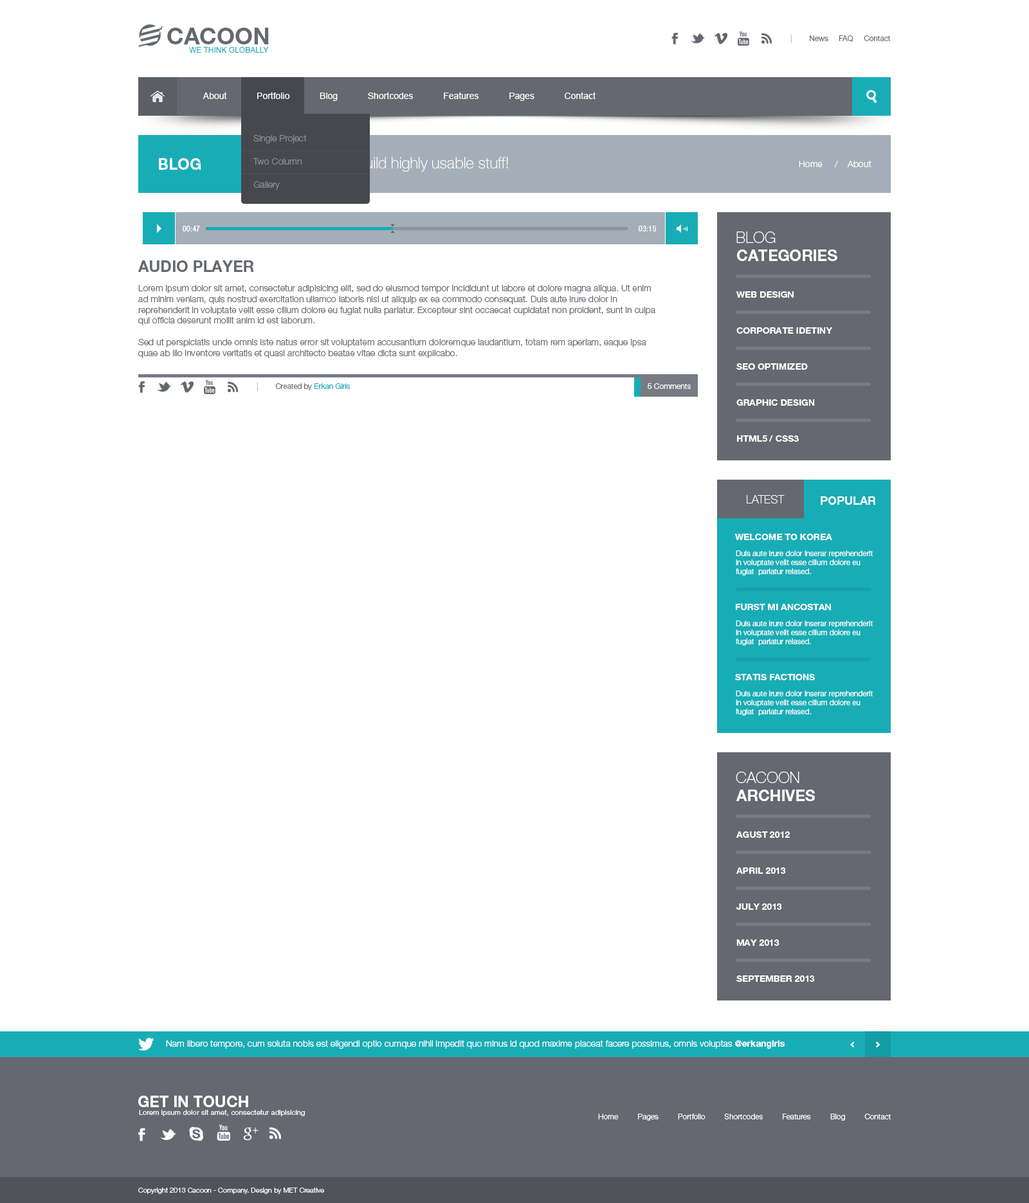
<style>
.page{position:relative;width:1029px;height:1203px;background:#ffffff}
.page>*{position:absolute;margin:0}
.t1{font:23.1px "HelveticaNeueLTPro-Bd";color:#656870}
.t2{font:7.7px "HelveticaNeueLTPro-Lt";color:#656870}
.t3{font:7.7px "HelveticaNeueLTPro-Lt";color:#bec1c8}
.t4{font:7.7px "ArialMT";color:#18adb6}
.t5{font:9px "ArialMT";color:#ffffff}
.t6{font:9px/23.1px "HelveticaNeueLTPro-Lt";color:#8d9099}
.t7{font:15.4px "HelveticaNeueLTPro-Bd";color:#ffffff}
.t8{font:15.4px "HelveticaNeueLTPro-Th";color:#ffffff}
.t9{font:9px "HelveticaNeueLTPro-Lt";color:#ffffff}
.t10{font:7.7px "HelveticaNeueLTPro-Cn";letter-spacing:0.025em;color:#ffffff}
.t11{font:15.4px "HelveticaNeueLTPro-Bd";color:#656870}
.t12{font:9px "HelveticaNeueLTPro-Lt";color:#656870}
.t13{font:9px "HelveticaNeueLTPro-Bd";color:#ffffff}
.t14{font:7.7px "HelveticaNeueLTPro-Lt";color:#18adb6}
.t15{font:7.7px "HelveticaNeueLTPro-Lt";color:#ffffff}
.t16{font:11.6px "HelveticaNeueLTPro-Th";color:#ffffff}
.t17{font:11.6px "HelveticaNeueLTPro-Bd";color:#ffffff}
.t18{font:7.1px "HelveticaNeueLTPro-Lt";letter-spacing:0.025em;color:#ffffff}
.t19{font:7.1px "HelveticaNeueLTPro-Lt";color:#ffffff}
</style>
<div class="page">
<p class="t1" style="left:167px;top:28px;width:102px;height:16px">CACOON</p>
<p class="t2" style="left:790px;top:35px;width:100px;height:8px"><span class="t3">|</span>        News     FAQ     Contact</p>
<p class="t4" style="left:189px;top:47px;width:80px;height:6px">WE THINK GLOBALLY</p>
<p class="t5" style="left:203px;top:92px;width:392px;height:9px">About            Portfolio            Blog            Shortcodes            Features            Pages            Contact</p>
<p class="t6" style="left:253px;top:135px;width:53px;height:55px">Single Project<br>Two Column<br>Gallery</p>
<p class="t7" style="left:159px;top:158px;width:42px;height:12px">BLOG</p>
<p class="t8" style="left:330px;top:157px;width:178px;height:15px">We build highly usable stuff!</p>
<p class="t9" style="left:798px;top:161px;width:73px;height:6px">Home     /    About</p>
<p class="t10" style="left:183px;top:226px;width:17px;height:5px">00:47</p>
<p class="t10" style="left:638px;top:226px;width:18px;height:5px">03:15</p>
<p class="t8" style="left:736px;top:231px;width:39px;height:12px">BLOG</p>
<p class="t7" style="left:737px;top:249px;width:100px;height:12px">CATEGORIES</p>
<p class="t11" style="left:138px;top:260px;width:116px;height:12px">AUDIO PLAYER</p>
<p class="t12" style="left:138px;top:285px;width:517px;height:73px">Lorem ipsum dolor sit amet, consectetur adipisicing elit, sed do eiusmod tempor incididunt ut labore et dolore magna aliqua. Ut enim ad minim veniam, quis nostrud exercitation ullamco laboris nisi ut aliquip ex ea commodo consequat. Duis aute irure dolor in reprehenderit in voluptate velit esse cillum dolore eu fugiat nulla pariatur. Excepteur sint occaecat cupidatat non proident, sunt in culpa qui officia deserunt mollit anim id est laborum.<br><br>Sed ut perspiciatis unde omnis iste natus error sit voluptatem accusantium doloremque laudantium, totam rem aperiam, eaque ipsa quae ab illo inventore veritatis et quasi architecto beatae vitae dicta sunt explicabo.</p>
<p class="t13" style="left:736px;top:291px;width:57px;height:7px">WEB DESIGN</p>
<p class="t13" style="left:736px;top:327px;width:96px;height:7px">CORPORATE IDETINY</p>
<p class="t13" style="left:736px;top:363px;width:71px;height:7px">SEO OPTIMIZED</p>
<p class="t14" style="left:256px;top:382px;width:94px;height:9px"><span class="t3">|</span><span class="t2">        Created by </span>Erkan Giris</p>
<p class="t15" style="left:647px;top:383px;width:43px;height:6px">5 Comments</p>
<p class="t13" style="left:736px;top:399px;width:79px;height:7px">GRAPHIC DESIGN</p>
<p class="t13" style="left:737px;top:435px;width:61px;height:7px">HTML5 / CSS3</p>
<p class="t16" style="left:746px;top:495px;width:38px;height:8px">LATEST</p>
<p class="t17" style="left:820px;top:496px;width:56px;height:9px">POPULAR</p>
<p class="t13" style="left:735px;top:534px;width:97px;height:6px">WELCOME TO KOREA</p>
<p class="t15" style="left:735px;top:550px;width:137px;height:25px">Duis aute irure dolor inserar reprehenderit in voluptate velit esse cillum dolore eu fugiat  pariatur relased.</p>
<p class="t13" style="left:735px;top:604px;width:96px;height:6px">FURST MI ANCOSTAN</p>
<p class="t15" style="left:735px;top:620px;width:137px;height:25px">Duis aute irure dolor inserar reprehenderit in voluptate velit esse cillum dolore eu fugiat  pariatur relased.</p>
<p class="t13" style="left:735px;top:674px;width:80px;height:6px">STATIS FACTIONS</p>
<p class="t15" style="left:735px;top:690px;width:137px;height:26px">Duis aute irure dolor inserar reprehenderit in voluptate velit esse cillum dolore eu fugiat  pariatur relased.</p>
<p class="t8" style="left:735px;top:771px;width:64px;height:12px">CACOON</p>
<p class="t7" style="left:735px;top:789px;width:80px;height:12px">ARCHIVES</p>
<p class="t13" style="left:735px;top:831px;width:54px;height:7px">AGUST 2012</p>
<p class="t13" style="left:735px;top:867px;width:51px;height:7px">APRIL 2013</p>
<p class="t13" style="left:736px;top:903px;width:46px;height:7px">JULY 2013</p>
<p class="t13" style="left:736px;top:939px;width:43px;height:7px">MAY 2013</p>
<p class="t13" style="left:736px;top:975px;width:79px;height:7px">SEPTEMBER 2013</p>
<p class="t9" style="left:166px;top:1040px;width:618px;height:8px">Nam libero tempore, cum soluta nobis est eligendi optio cumque nihil impedit quo minus id quod maxime placeat facere possimus, omnis voluptas <span class="t13">@erkangiris</span></p>
<p class="t7" style="left:138px;top:1095px;width:110px;height:12px">GET IN TOUCH</p>
<p class="t18" style="left:139px;top:1110px;width:166px;height:6px">Lorem ipsum dolor sit amet, consectetur adipisicing</p>
<p class="t15" style="left:598px;top:1113px;width:292px;height:7px">Home         Pages         Portfolio         Shortcodes         Features         Blog         Contact</p>
<p class="t19" style="left:138px;top:1187px;width:186px;height:7px">Copyright 2013 Cacoon - Company. Design by MET Creative</p>
</div>
